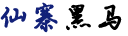
<style>
.page{position:relative;width:128px;height:36px;background:#ffffff}
.page>*{position:absolute;margin:0}
.t1{font:30px "LiDeBiao-Xing-3.0";letter-spacing:0.12em;color:#122179;font-weight:bold;scale:0.93 1}
.t2{font:30px "LiDeBiao-Xing-3.0";letter-spacing:0.12em;color:#000000;font-weight:bold;scale:0.93 1}
</style>
<div class="page">
<p class="t1" style="left:0px;top:2px;width:122px;height:31px">仙寨<span class="t2">黑马</span></p>
</div>
